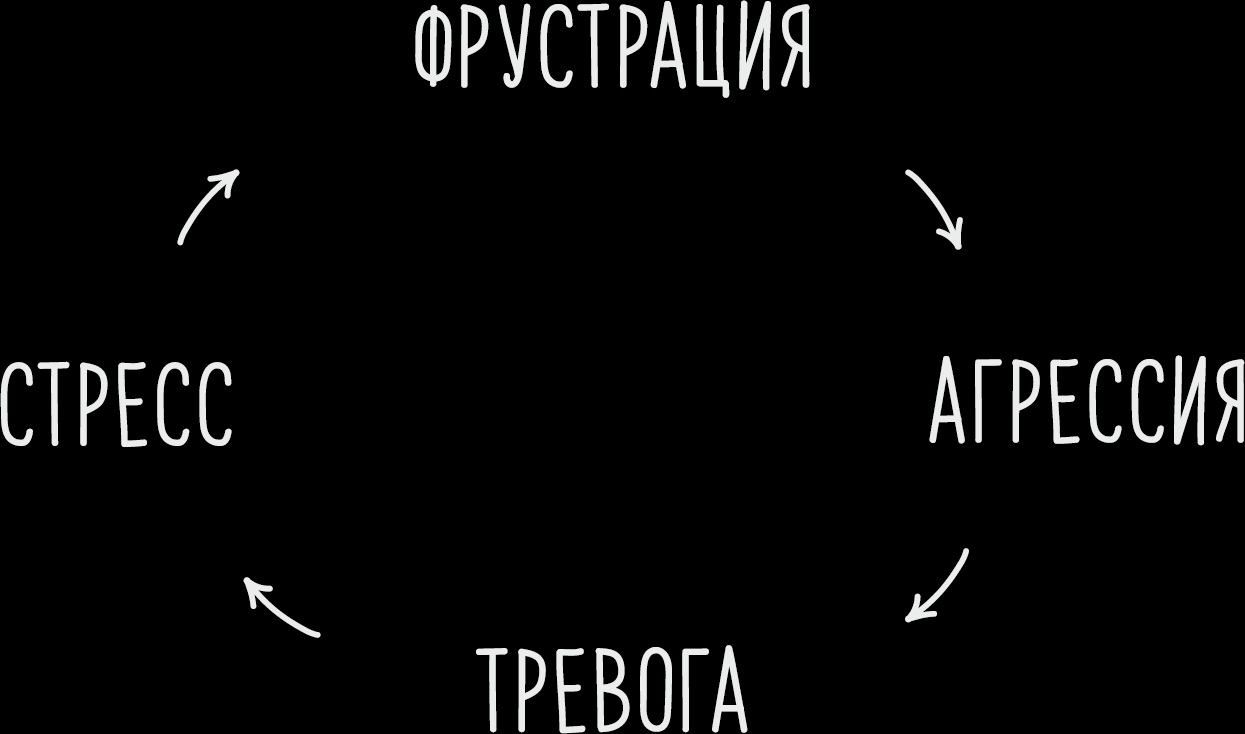
<style>
.page{position:relative;width:1245px;height:734px;background:#000000}
.page>*{position:absolute;margin:0}
.t1{font:72px "PapayaSunrise";color:#ebecec;font-weight:bold}
.t2{font:72px "PWNewArrows";color:#ebecec;font-weight:bold}
</style>
<div class="page">
<p class="t1" style="left:415px;top:0px;width:395px;height:98px">фрустрация</p>
<p class="t2" style="left:177px;top:169px;width:63px;height:77px;rotate:-9deg">u</p>
<p class="t2" style="left:905px;top:169px;width:58px;height:81px;rotate:99deg">u</p>
<p class="t1" style="left:0px;top:361px;width:232px;height:86px">стресс</p>
<p class="t1" style="left:929px;top:355px;width:316px;height:91px">агрессия</p>
<p class="t2" style="left:905px;top:548px;width:64px;height:75px;rotate:173deg">u</p>
<p class="t2" style="left:243px;top:577px;width:78px;height:61px;rotate:-100deg">u</p>
<p class="t1" style="left:476px;top:645px;width:272px;height:89px">тревога</p>
</div>
